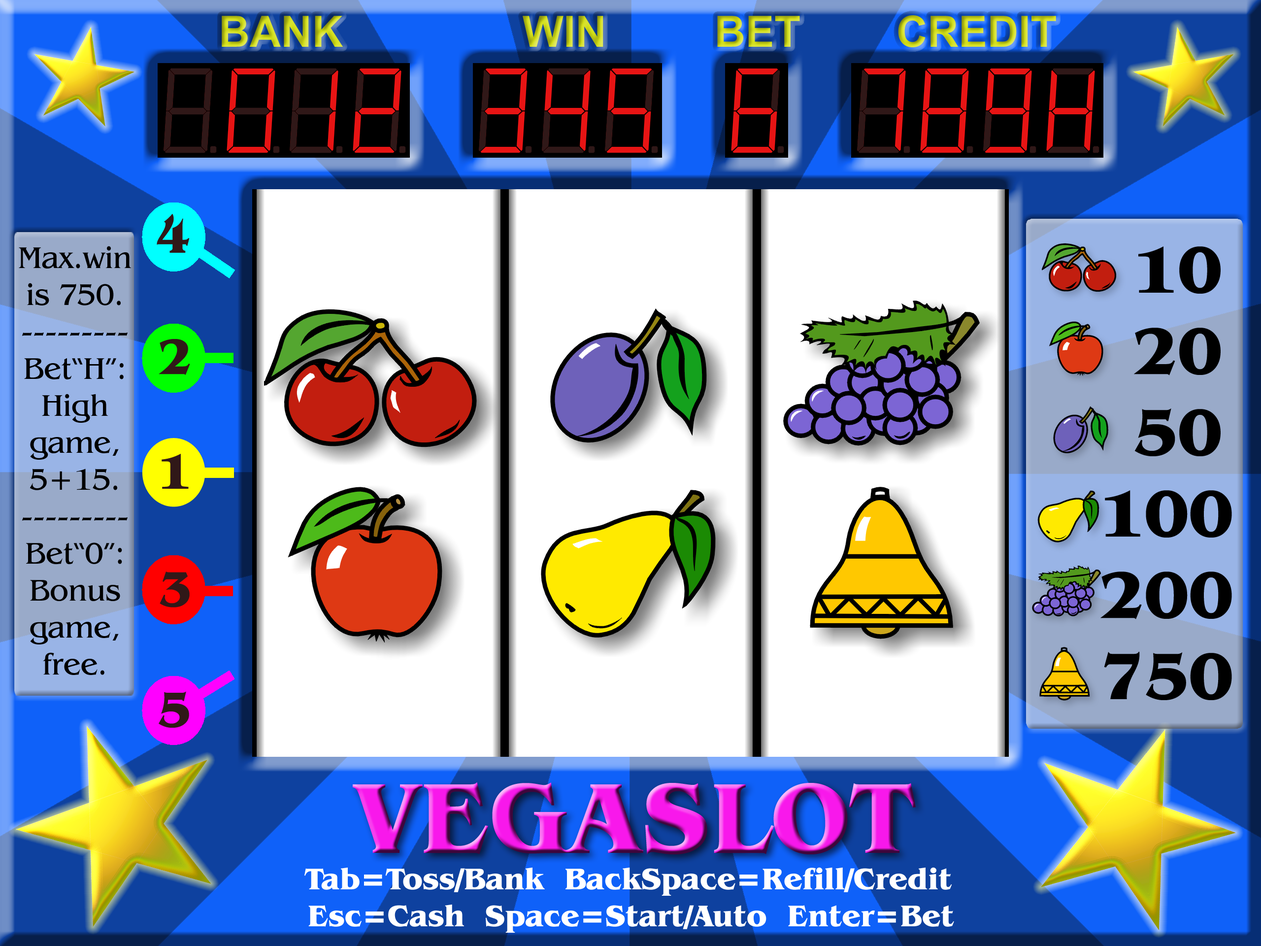
<style>
.page{position:relative;width:1261px;height:946px;background:#ffffff}
.page>*{position:absolute;margin:0}
.t1{font:43.1px "Arial-BoldMT"}
.t2{font:30.8px "BenguiatITCbyBT-Book";color:#000000}
.t3{font:67.7px "BenguiatITCbyBT-Bold";color:#000000}
.t4{font:102.6px "BenguiatITCbyBT-Bold"}
.t5{font:30.8px "BenguiatITCbyBT-Bold";color:#ffffff}
</style>
<div class="page">
<p class="t1" style="left:222px;top:15px;width:834px;height:32px">BANK               WIN         BET        CREDIT</p>
<p class="t2" style="left:19px;top:246px;width:113px;height:429px;text-align:center">Max.win<br>is 750.<br>---------<br>Bet“H”:<br>High<br>game,<br>5+15.<br>---------<br>Bet“0”:<br>Bonus<br>game,<br>free.</p>
<p class="t3" style="left:1100px;top:246px;width:132px;height:454px;text-align:center">10<br> 20<br> 50<br>100<br>200<br>750</p>
<p class="t4" style="left:353px;top:782px;width:563px;height:72px">VEGASLOT</p>
<p class="t5" style="left:304px;top:867px;width:650px;height:65px;text-align:center">Tab=Toss/Bank  BackSpace=Refill/Credit<br>Esc=Cash  Space=Start/Auto  Enter=Bet</p>
</div>
